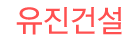
<style>
.page{position:relative;width:138px;height:42px;background:#ffffff}
.page>*{position:absolute;margin:0}
.t1{font:31px "THELuxGoM";color:#ff5050;scale:0.95 1}
</style>
<div class="page">
<p class="t1" style="left:16px;top:7px;width:106px;height:28px">유진건설</p>
</div>
